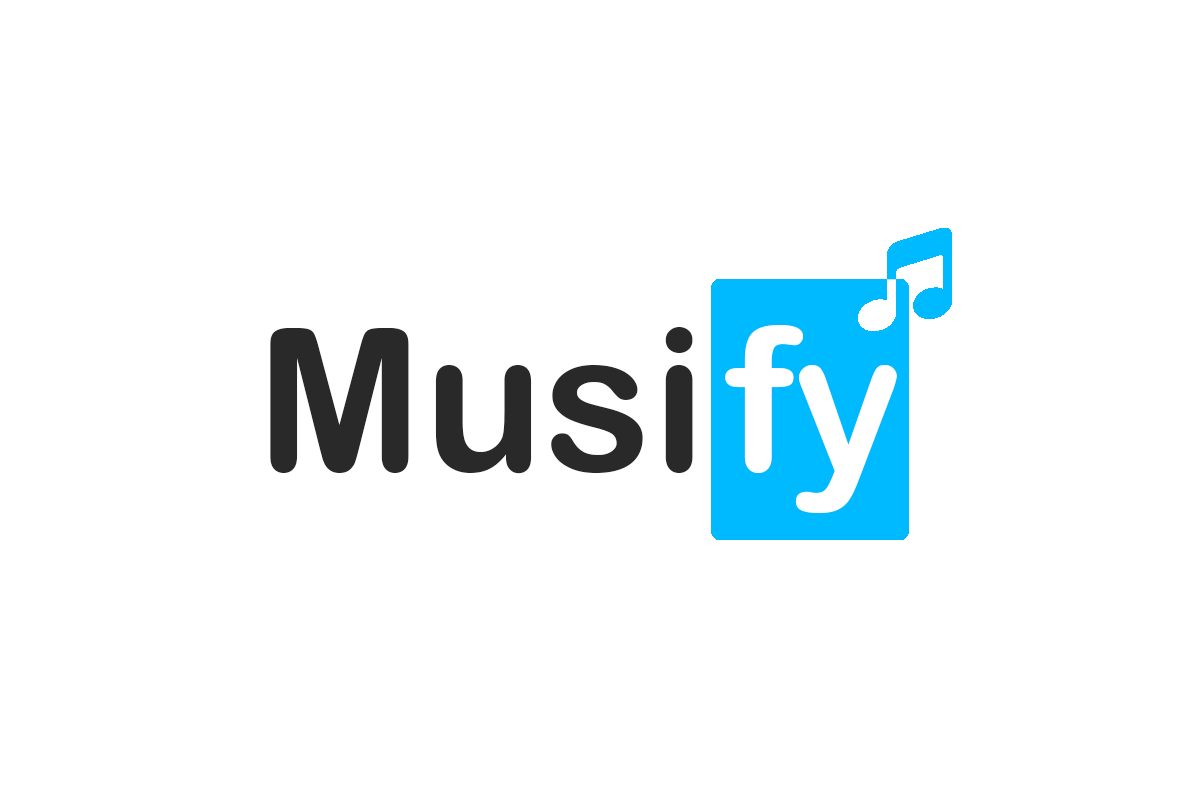
<style>
.page{position:relative;width:1200px;height:800px;background:#ffffff}
.page>*{position:absolute;margin:0}
.t1{font:200px "ArialRoundedMTBold";color:#292929}
.t2{font:200px "ArialRoundedMTBold";color:#ffffff}
</style>
<div class="page">
<p class="t1" style="left:270px;top:327px;width:423px;height:147px">Musi</p>
<p class="t2" style="left:725px;top:325px;width:172px;height:188px">fy</p>
</div>
